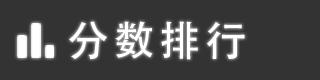
<style>
.page{position:relative;width:320px;height:80px;background:#333333}
.page>*{position:absolute;margin:0}
.t1{font:41.8px "AdobeHeitiStd-Regular";letter-spacing:0.1em;color:#ffffff}
</style>
<div class="page">
<p class="t1" style="left:69px;top:21px;width:176px;height:39px">分数排行</p>
</div>
